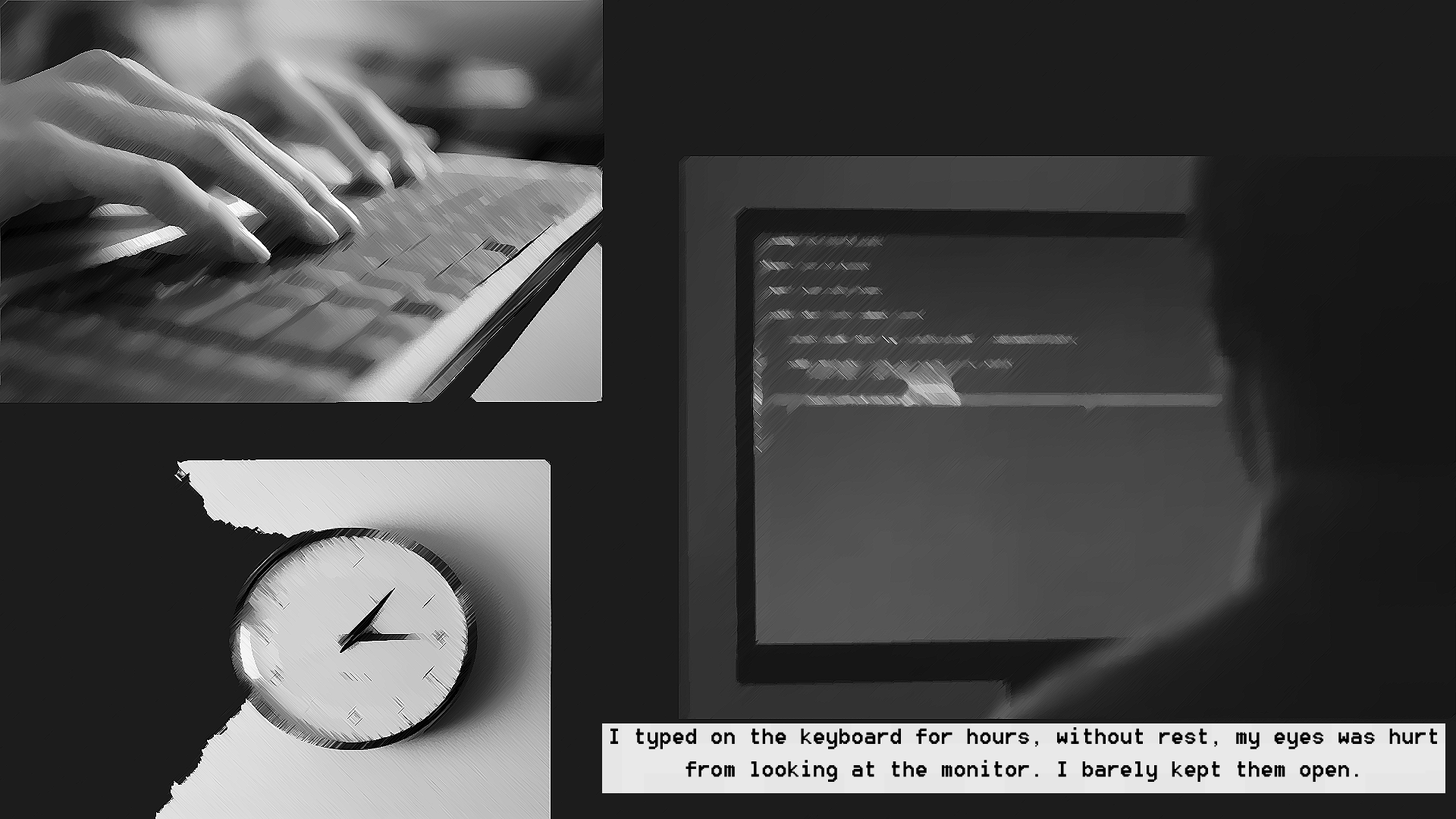
<style>
.page{position:relative;width:1456px;height:819px;background:#1c1c1c}
.page>*{position:absolute;margin:0}
.t1{font:27.3px "8514oem";color:#000000}
</style>
<div class="page">
<p class="t1" style="left:610px;top:727px;width:827px;height:55px;text-align:center">I typed on the keyboard for hours, without rest, my eyes was hurt from looking at the monitor. I barely kept them open.</p>
</div>
